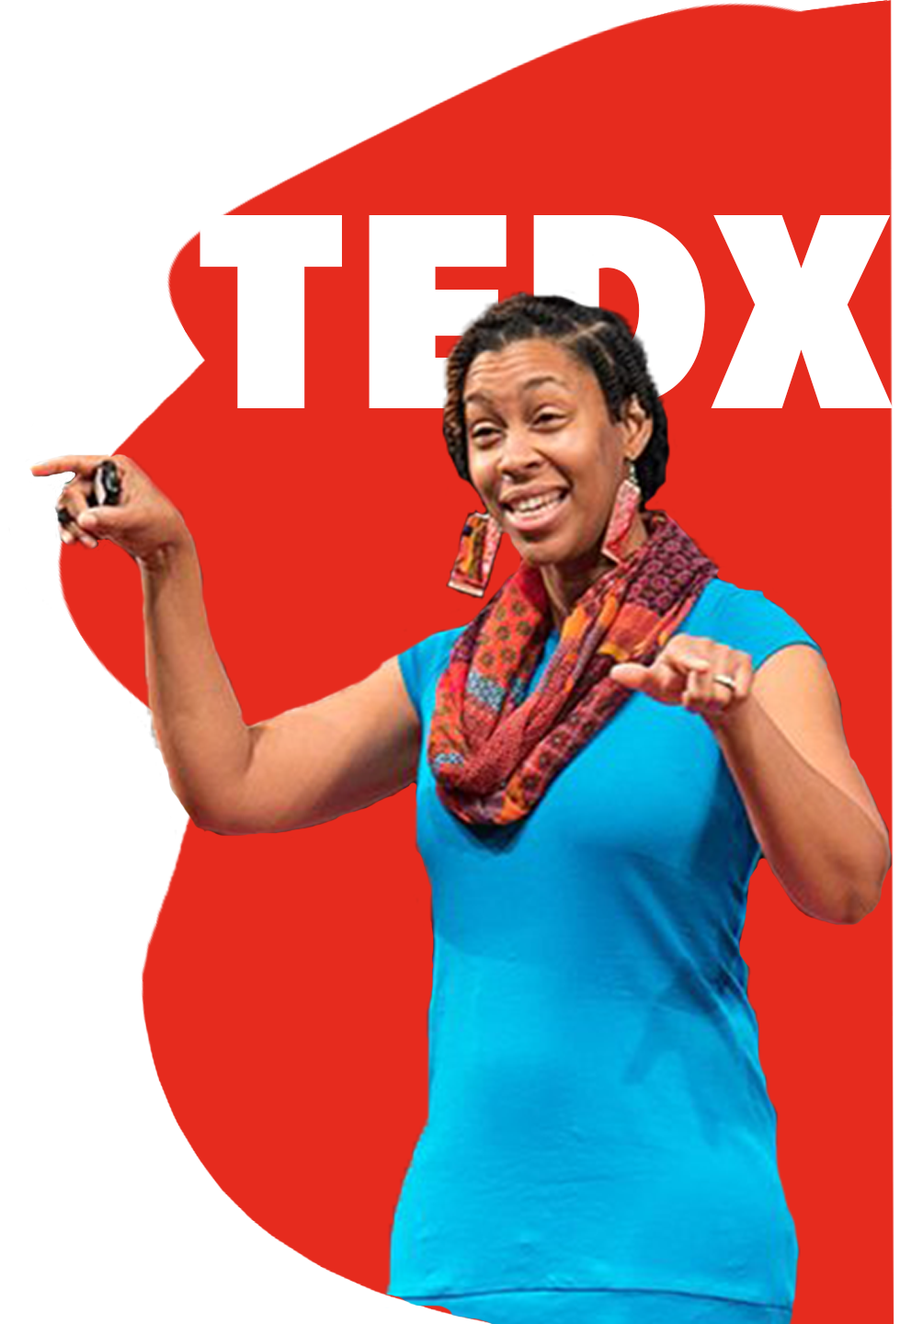
<style>
.page{position:relative;width:900px;height:1324px;background:#e62b1e}
.page>*{position:absolute;margin:0}
.t1{font:275.9px "RACE1BranntNCV";color:#ffffff}
</style>
<div class="page">
<p class="t1" style="left:200px;top:215px;width:694px;height:193px">TEDx</p>
</div>
